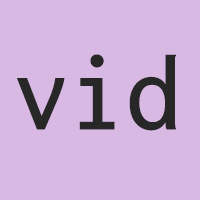
<style>
.page{position:relative;width:200px;height:200px;background:#d7b9e4}
.page>*{position:absolute;margin:0}
.t1{font:112.2px "Inconsolata-Medium";color:#272727}
</style>
<div class="page">
<p class="t1" style="left:17px;top:54px;width:160px;height:77px">vid</p>
</div>
